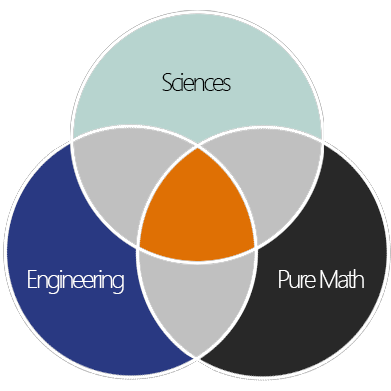
<style>
.page{position:relative;width:391px;height:391px;background:#ffffff}
.page>*{position:absolute;margin:0}
.t1{font:25px "SegoeUI-Light";letter-spacing:-0.1em;color:#000000}
.t2{font:25px "SegoeUI-Light";letter-spacing:-0.1em;color:#ffffff}
</style>
<div class="page">
<p class="t1" style="left:162px;top:73px;width:69px;height:18px">Sciences</p>
<p class="t2" style="left:28px;top:270px;width:96px;height:24px">Engineering</p>
<p class="t2" style="left:279px;top:269px;width:85px;height:19px">Pure Math</p>
</div>
